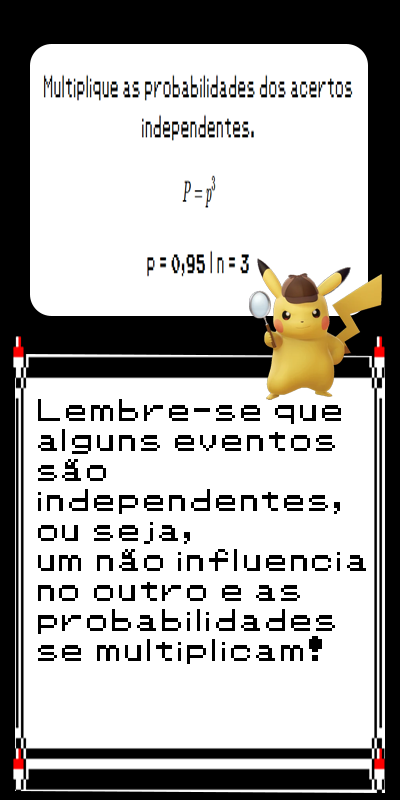
<style>
.page{position:relative;width:400px;height:800px;background:#ffffff}
.page>*{position:absolute;margin:0}
.t1{font:25px "Pokemon-Classic";color:#000000}
</style>
<div class="page">
<p class="t1" style="left:38px;top:399px;width:328px;height:265px">Lembre-se que <br>alguns eventos <br>são <br>independentes, <br>ou seja, <br>um não influencia <br>no outro e as <br>probabilidades <br>se multiplicam!</p>
</div>
